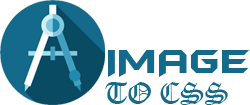
<style>
.page{position:relative;width:250px;height:105px;background:#ffffff}
.page>*{position:absolute;margin:0}
.t1{font:38.4px "BatmanForeverAlternate";color:#146a8a}
.t2{font:28.8px "OldEnglishTextMT";color:#146a8a}
</style>
<div class="page">
<p class="t1" style="left:108px;top:50px;width:141px;height:27px">IMAGE</p>
<p class="t2" style="left:105px;top:82px;width:123px;height:23px">TO CSS</p>
</div>
